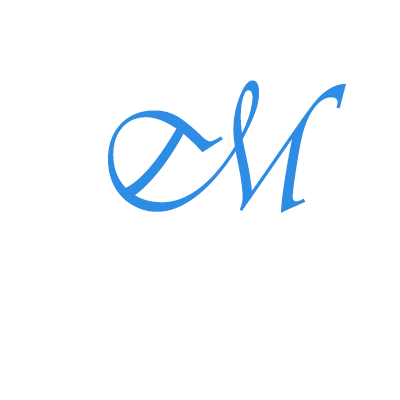
<style>
.page{position:relative;width:400px;height:400px;background:#ffffff}
.page>*{position:absolute;margin:0}
.t1{font:188.9px "Vivaldii";color:#2d8ce4;scale:0.86 1}
</style>
<div class="page">
<p class="t1" style="left:108px;top:80px;width:238px;height:133px">M</p>
</div>
